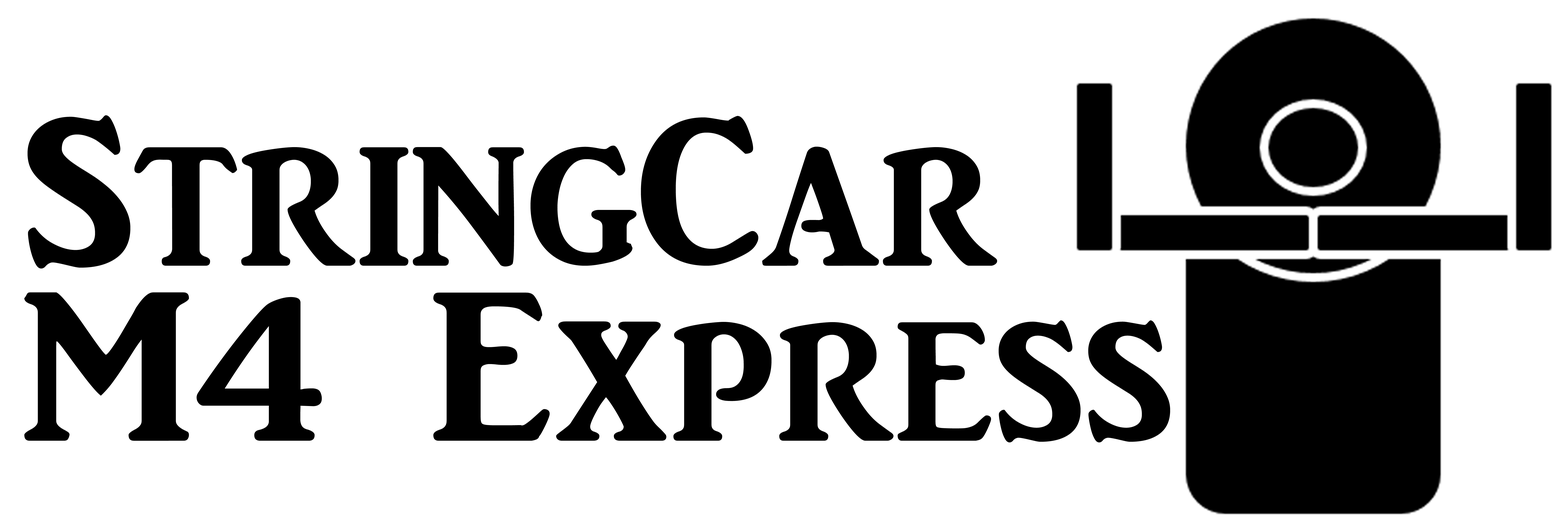
<style>
.page{position:relative;width:1568px;height:527px;background:#ffffff}
.page>*{position:absolute;margin:0}
.t1{font:218.8px/175px "ARJULIAN";color:#000000}
</style>
<div class="page">
<p class="t1" style="left:24px;top:115px;width:1146px;height:328px">StringCar<br>M4 Express</p>
</div>
